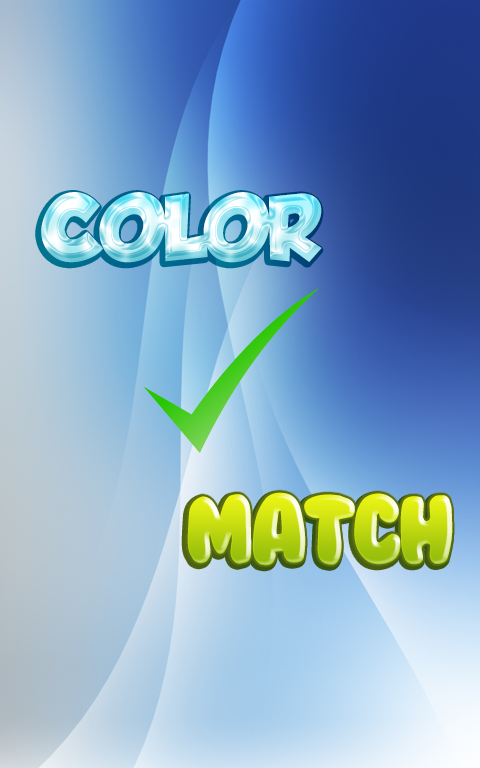
<style>
.page{position:relative;width:480px;height:768px}
.page>*{position:absolute;margin:0}
.t1{font:80px "GROBOLD";letter-spacing:-0.01em}
.t2{font:90px "BubbleGum";letter-spacing:-0.05em}
</style>
<div class="page">
<p class="t1" style="left:41px;top:192px;width:281px;height:71px">COLOR</p>
<p class="t2" style="left:187px;top:492px;width:266px;height:74px">matcH</p>
</div>
